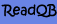
<style>
.page{position:relative;width:57px;height:24px;background:#6983e4}
.page>*{position:absolute;margin:0}
.t1{font:13.3px "KristenITC-Regular";color:#000000}
</style>
<div class="page">
<p class="t1" style="left:1px;top:4px;width:56px;height:14px">ReadQB</p>
</div>
